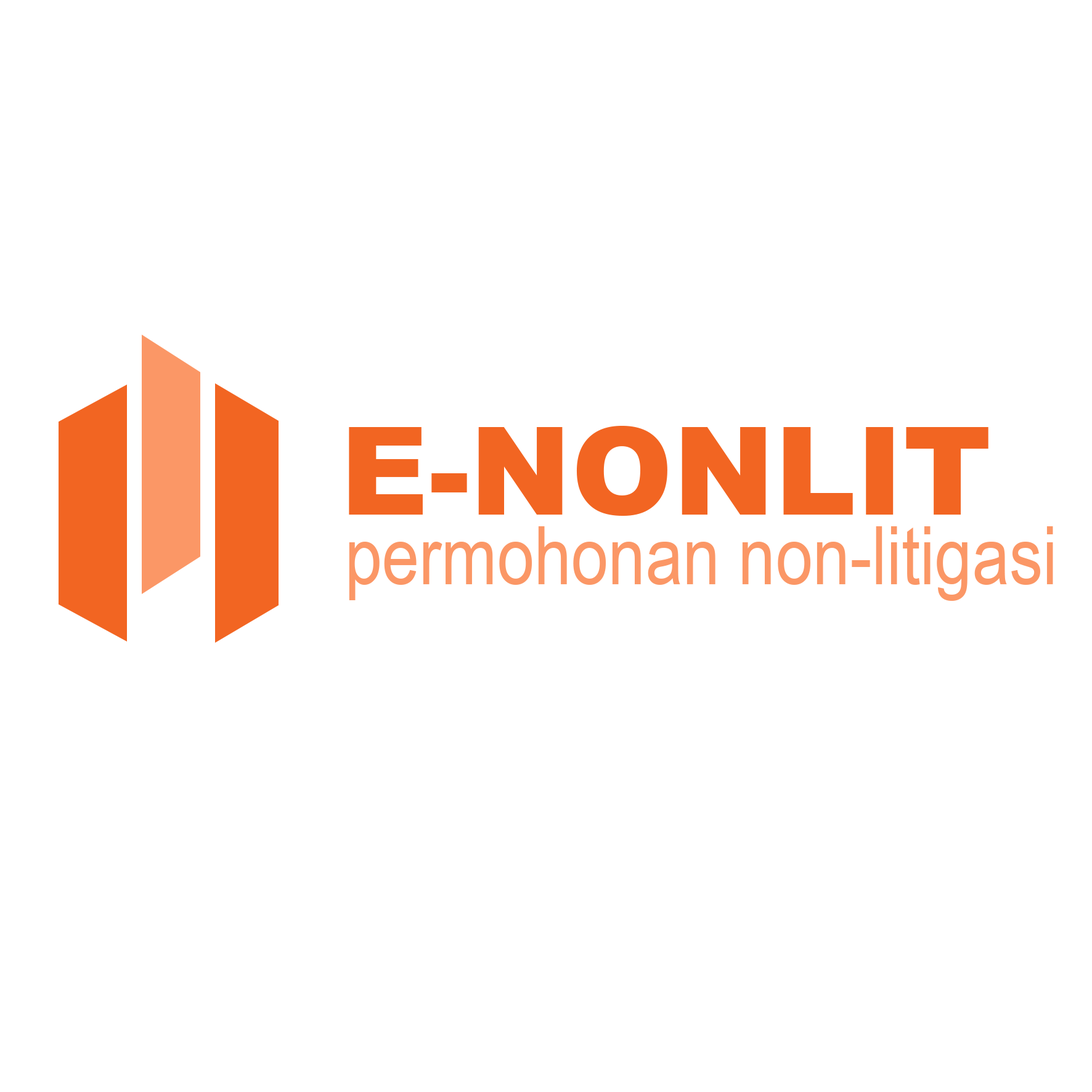
<style>
.page{position:relative;width:1092px;height:1092px;background:#ffffff}
.page>*{position:absolute;margin:0}
.t1{font:122.2px "Arial-Black";color:#f26522}
.t2{font:81.5px "ArialNarrow";color:#fb9766}
</style>
<div class="page">
<p class="t1" style="left:349px;top:426px;width:639px;height:90px">E-NONLIT</p>
<p class="t2" style="left:349px;top:526px;width:704px;height:75px">permohonan non-litigasi</p>
</div>
